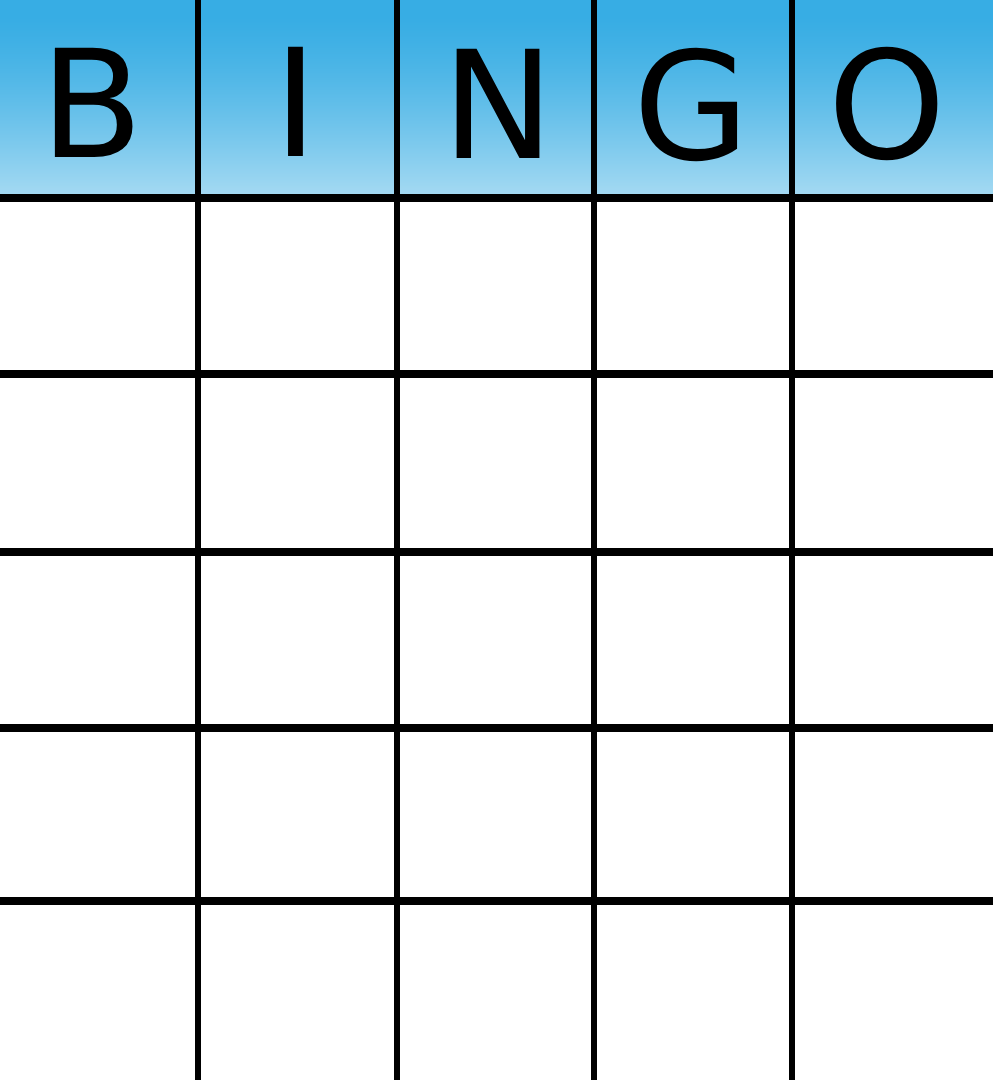
<style>
.page{position:relative;width:993px;height:1080px;background:#ffffff}
.page>*{position:absolute;margin:0}
.t1{font:150px "DejaVuSans";color:#000000}
</style>
<div class="page">
<p class="t1" style="left:54px;top:47px;width:79px;height:110px">B</p>
<p class="t1" style="left:288px;top:46px;width:15px;height:110px">I</p>
<p class="t1" style="left:456px;top:48px;width:84px;height:110px">N</p>
<p class="t1" style="left:641px;top:47px;width:97px;height:115px">G</p>
<p class="t1" style="left:836px;top:46px;width:102px;height:115px">O</p>
</div>
